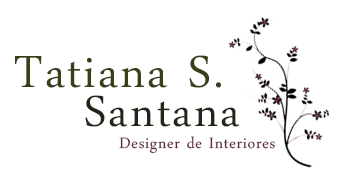
<style>
.page{position:relative;width:337px;height:180px;background:#ffffff}
.page>*{position:absolute;margin:0}
.t1{font:66px "DaunPenh";letter-spacing:0.035em;color:#3b3e19}
.t2{font:64px "DaunPenh";letter-spacing:0.035em;color:#262319}
.t3{font:22px "DaunPenh";letter-spacing:0.035em;color:#622642}
</style>
<div class="page">
<p class="t1" style="left:14px;top:55px;width:207px;height:33px">Tatiana S.</p>
<p class="t2" style="left:85px;top:95px;width:155px;height:32px">Santana</p>
<p class="t3" style="left:119px;top:136px;width:156px;height:18px">Designer de Interiores</p>
</div>
